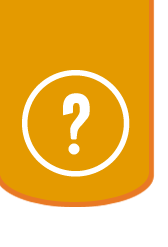
<style>
.page{position:relative;width:168px;height:247px;background:#e49a00}
.page>*{position:absolute;margin:0}
.t1{font:86px "Franchise-Bold";color:#ffffff}
</style>
<div class="page">
<p class="t1" style="left:63px;top:93px;width:27px;height:62px">?</p>
</div>
